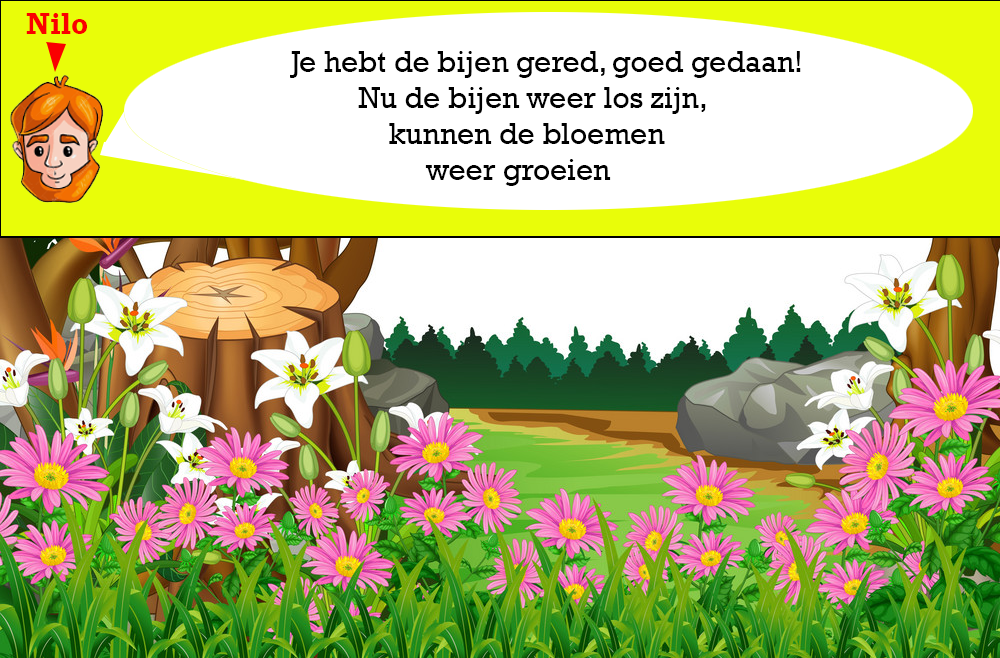
<style>
.page{position:relative;width:1000px;height:658px;background:#ffffff}
.page>*{position:absolute;margin:0}
.t1{font:30px "Rockwell-Bold";color:#fa0000}
.t2{font:30px "Rockwell";color:#000000}
</style>
<div class="page">
<p class="t1" style="left:26px;top:13px;width:61px;height:21px">Nilo</p>
<p class="t2" style="left:290px;top:51px;width:511px;height:135px">Je hebt de bijen gered, goed gedaan!<br>         Nu de bijen weer los zijn, <br>             kunnen de bloemen <br>                  weer groeien</p>
</div>
